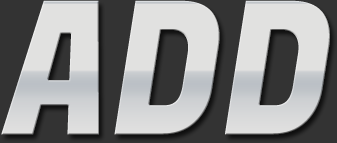
<style>
.page{position:relative;width:337px;height:143px;background:#333333}
.page>*{position:absolute;margin:0}
.t1{font:185.2px "FugazOne-Regular";color:#dfdfdf;scale:0.89 1}
</style>
<div class="page">
<p class="t1" style="left:1px;top:0px;width:329px;height:135px">ADD</p>
</div>
